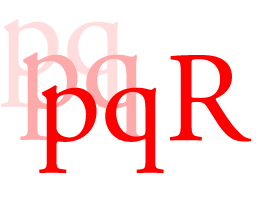
<style>
.page{position:relative;width:256px;height:200px;background:#ffffff}
.page>*{position:absolute;margin:0}
.t1{font:128px "AGaramondPro-Regular";color:#ff0000}
</style>
<div class="page">
<p class="t1" style="left:39px;top:55px;width:213px;height:119px">pqR</p>
</div>
